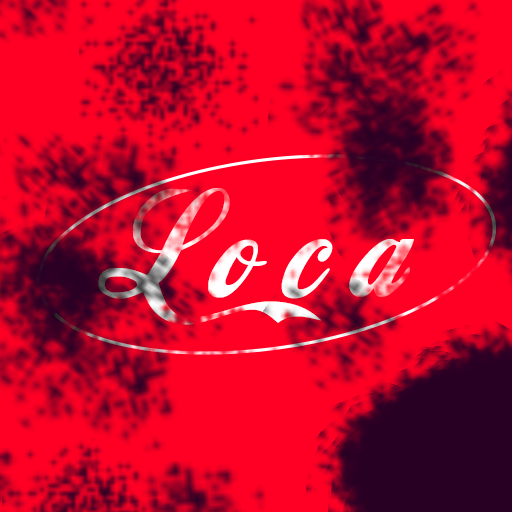
<style>
.page{position:relative;width:512px;height:512px;background:#ff0024}
.page>*{position:absolute;margin:0}
.t1{font:150px "LokiCola";letter-spacing:0.16em}
</style>
<div class="page">
<p class="t1" style="left:98px;top:188px;width:316px;height:137px">Loca</p>
</div>
